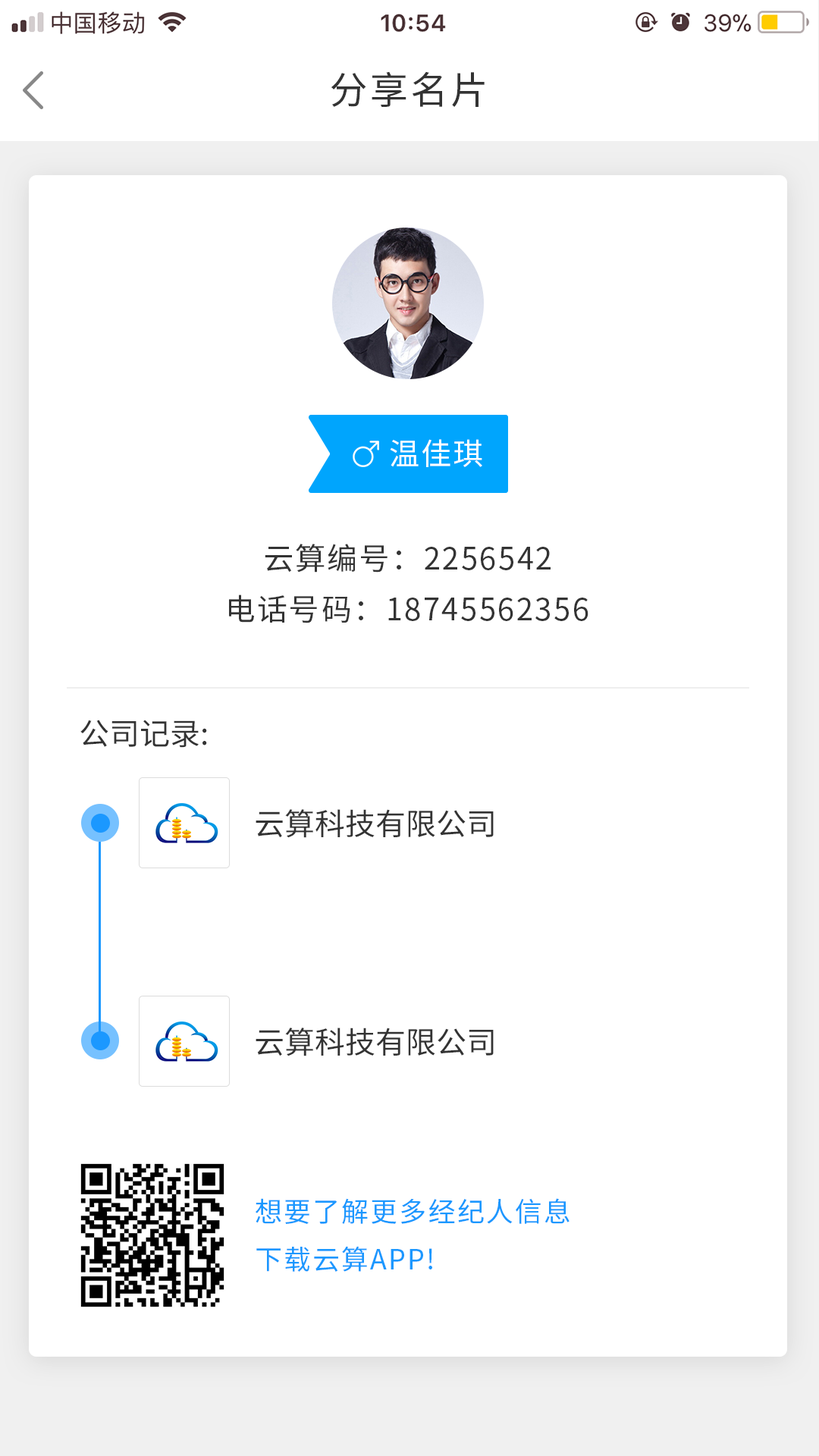
<style>
.page{position:relative;width:819px;height:1456px;background:#ffffff}
.page>*{position:absolute;margin:0}
.t1{font:37.9px "SourceHanSansCN-Regular";letter-spacing:0.06em;color:#333333}
.t2{font:30.3px "SourceHanSansCN-Regular";letter-spacing:0.06em;color:#ffffff}
.t3{font:30.3px "SourceHanSansCN-Regular";letter-spacing:0.06em;color:#333333}
.t4{font:30.3px "SourceHanSansCN-Regular";color:#333333}
.t5{font:27.3px "SourceHanSansCN-Regular";letter-spacing:0.06em;color:#1b98ff}
</style>
<div class="page">
<p class="t1" style="left:331px;top:71px;width:154px;height:36px">分享名片</p>
<p class="t2" style="left:390px;top:439px;width:92px;height:28px">温佳琪</p>
<p class="t3" style="left:265px;top:544px;width:286px;height:29px">云算编号：2256542</p>
<p class="t3" style="left:229px;top:595px;width:359px;height:28px">电话号码：18745562356</p>
<p class="t4" style="left:80px;top:720px;width:127px;height:28px">公司记录:</p>
<p class="t4" style="left:256px;top:809px;width:238px;height:29px">云算科技有限公司</p>
<p class="t4" style="left:256px;top:1028px;width:238px;height:28px">云算科技有限公司</p>
<p class="t5" style="left:256px;top:1198px;width:314px;height:74px">想要了解更多经纪人信息 <br>下载云算APP!</p>
</div>
